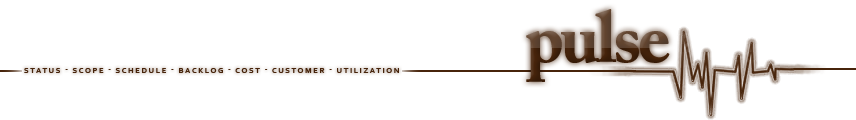
<style>
.page{position:relative;width:856px;height:120px;background:#ffffff}
.page>*{position:absolute;margin:0}
.t1{font:72px "ACaslonPro-Bold";letter-spacing:-0.05em}
.t2{font:8px "Corbel-Bold";letter-spacing:0.2em;color:#47240b;text-transform:uppercase}
</style>
<div class="page">
<p class="t1" style="left:526px;top:9px;width:144px;height:73px">pulse</p>
<p class="t2" style="left:24px;top:68px;width:375px;height:5px">status - scope - schedule - backlog - cost - customer - utilization</p>
</div>
